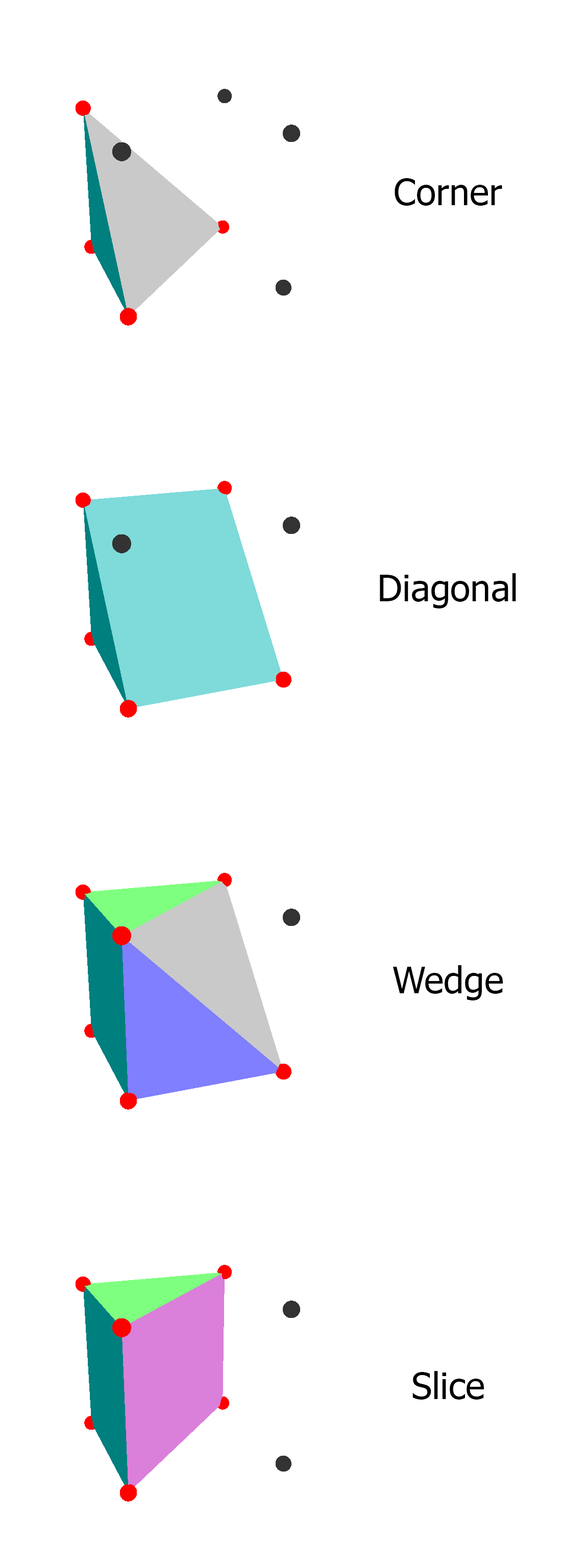
<style>
.page{position:relative;width:588px;height:1568px;background:#ffffff}
.page>*{position:absolute;margin:0}
.t1{font:36.8px "Tahoma";color:#000000}
</style>
<div class="page">
<p class="t1" style="left:395px;top:178px;width:107px;height:28px">Corner</p>
<p class="t1" style="left:380px;top:573px;width:136px;height:35px">Diagonal</p>
<p class="t1" style="left:393px;top:965px;width:110px;height:35px">Wedge</p>
<p class="t1" style="left:412px;top:1371px;width:72px;height:29px">Slice</p>
</div>
